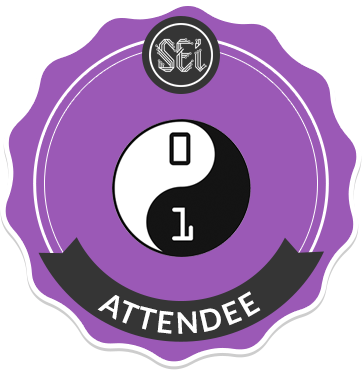
<style>
.page{position:relative;width:362px;height:375px;background:#9b59b6}
.page>*{position:absolute;margin:0}
.t1{font:29.7px "Lato-Bold";letter-spacing:0.1em;color:#ffffff}
</style>
<div class="page">
<p class="t1" style="left:97px;top:291px;width:164px;height:43px">ATTENDEE</p>
</div>
